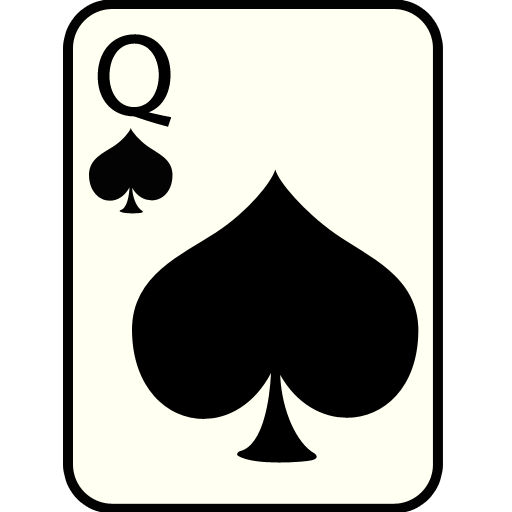
<style>
.page{position:relative;width:512px;height:512px;background:#fffff2}
.page>*{position:absolute;margin:0}
.t1{font:200px "MyriadPro-Regular";letter-spacing:-0.05em;color:#000000;font-variant:small-caps;font-weight:bold}
</style>
<div class="page">
<p class="t1" style="left:97px;top:34px;width:74px;height:93px">Q</p>
</div>
